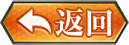
<style>
.page{position:relative;width:129px;height:45px}
.page>*{position:absolute;margin:0}
.t1{font:30px "RyuminPr6N-ExBold";color:#ffffff}
</style>
<div class="page">
<p class="t1" style="left:55px;top:8px;width:57px;height:28px">返回</p>
</div>
